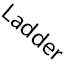
<style>
.page{position:relative;width:64px;height:64px;background:#ffffff}
.page>*{position:absolute;margin:0}
.t1{font:25px "MyriadPro-Regular";color:#000000}
</style>
<div class="page">
<p class="t1" style="left:1px;top:3px;width:62px;height:57px;rotate:41deg">Ladder</p>
</div>
